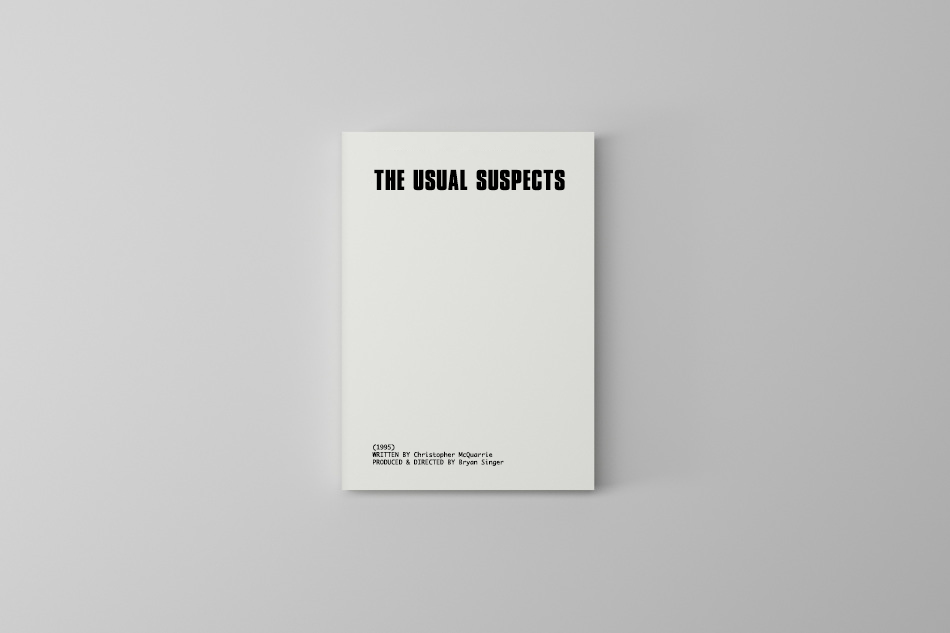
<style>
.page{position:relative;width:950px;height:633px}
.page>*{position:absolute;margin:0}
.t1{font:27.1px "CompactaICGBold";color:#000000}
.t2{font:6.2px "Monaco";color:#000000}
</style>
<div class="page">
<p class="t1" style="left:374px;top:169px;width:191px;height:22px">THE USUAL SUSPECTS</p>
<p class="t2" style="left:372px;top:444px;width:132px;height:22px">(1995)<br>WRITTEN BY Christopher McQuarrie<br>PRODUCED &amp; DIRECTED BY Bryan Singer</p>
</div>
